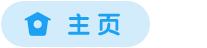
<style>
.page{position:relative;width:207px;height:48px;background:#d2ecfc}
.page>*{position:absolute;margin:0}
.t1{font:24px "FZY4JW--GB1-0";color:#1da1f2}
</style>
<div class="page">
<p class="t1" style="left:67px;top:13px;width:54px;height:23px">主 页</p>
<p class="t1" style="left:67px;top:13px;width:54px;height:23px">主 页</p>
<p class="t1" style="left:68px;top:13px;width:53px;height:23px">主 页</p>
</div>
